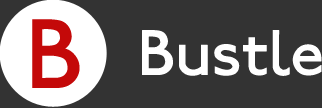
<style>
.page{position:relative;width:322px;height:108px;background:#333333}
.page>*{position:absolute;margin:0}
.t1{font:104.1px "P22JohnstonUnderground";color:#c40909}
.t2{font:67.9px "P22JohnstonUnderground";color:#ffffff}
</style>
<div class="page">
<p class="t1" style="left:32px;top:19px;width:48px;height:69px">B</p>
<p class="t2" style="left:142px;top:30px;width:180px;height:46px">Bustle</p>
</div>
